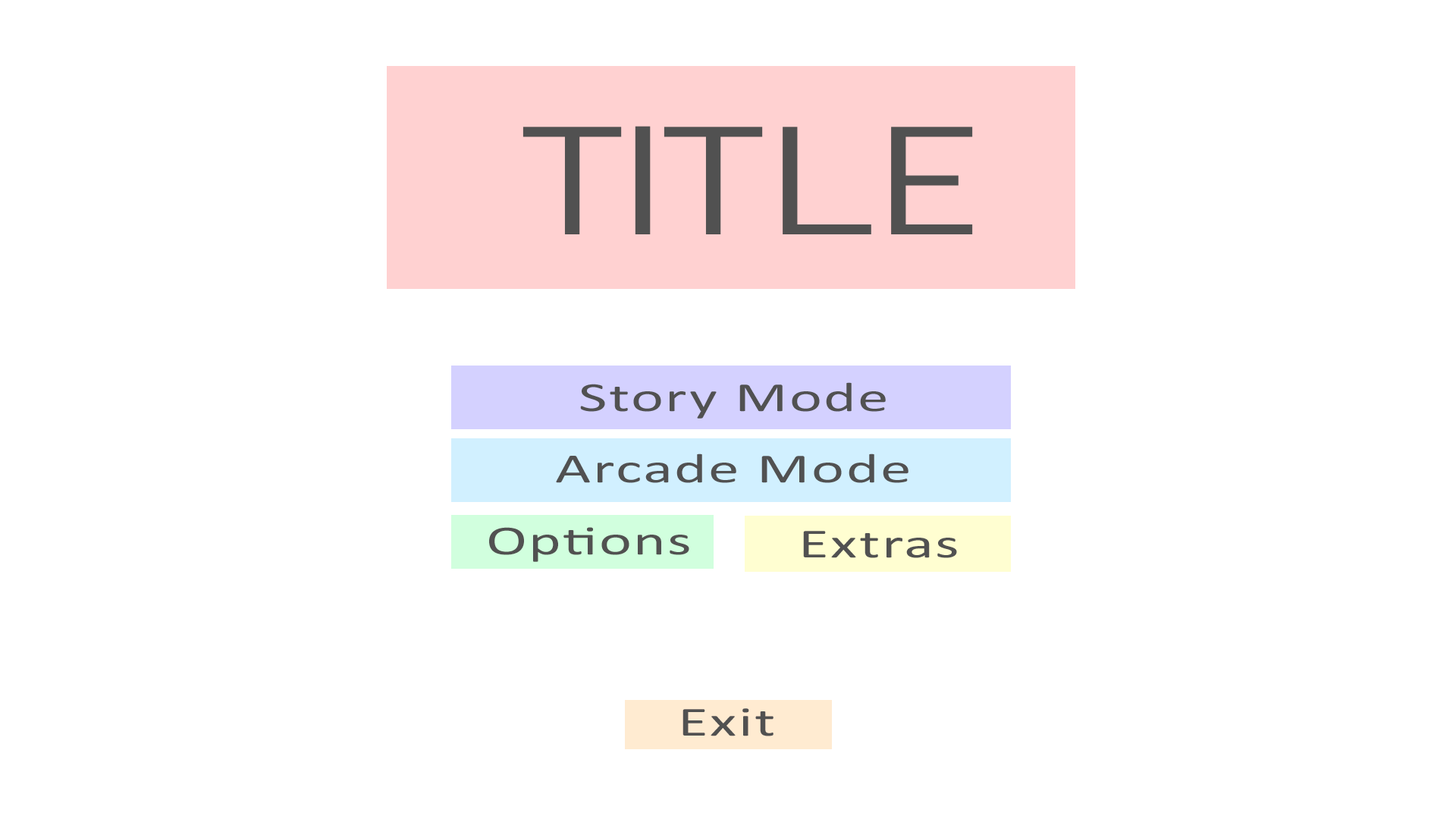
<style>
.page{position:relative;width:1456px;height:819px;background:#ffffff}
.page>*{position:absolute;margin:0}
.t1{font:153.2px "DolceVita";letter-spacing:0.03em;color:#515151;scale:1.48 1}
.t2{font:41.7px "Calibri";letter-spacing:0.03em;color:#515151;scale:1.48 1}
</style>
<div class="page">
<p class="t1" style="left:522px;top:126px;width:451px;height:108px">Title</p>
<p class="t2" style="left:580px;top:382px;width:306px;height:37px">Story Mode</p>
<p class="t2" style="left:556px;top:453px;width:352px;height:30px">Arcade Mode</p>
<p class="t2" style="left:489px;top:527px;width:200px;height:35px">Options</p>
<p class="t2" style="left:803px;top:531px;width:154px;height:27px">Extras</p>
<p class="t2" style="left:682px;top:708px;width:91px;height:28px">Exit</p>
</div>
